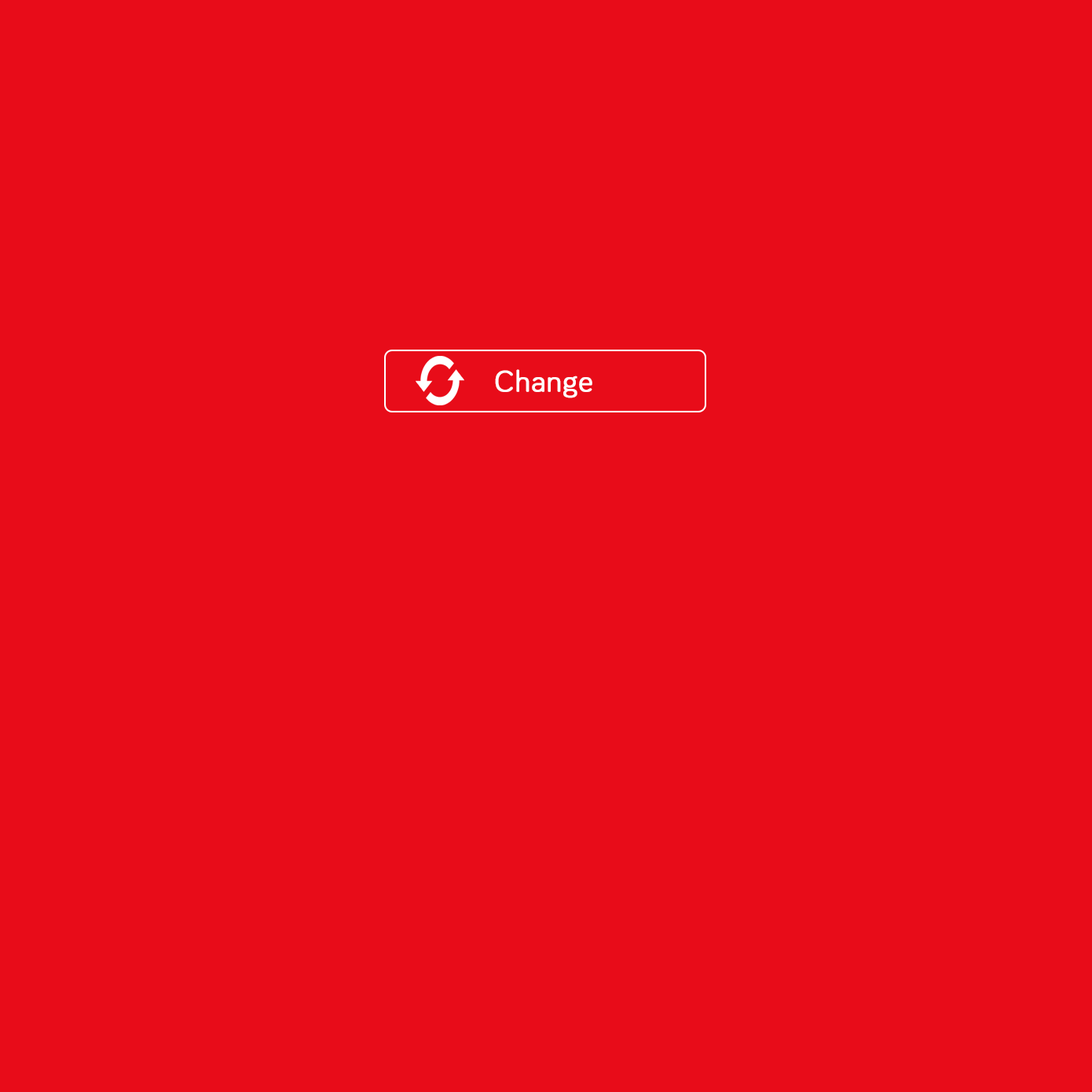
<style>
.page{position:relative;width:1092px;height:1092px;background:#e80c19}
.page>*{position:absolute;margin:0}
.t1{font:30.3px "Bariol-Regular";letter-spacing:0.01em;color:#fefefe;font-weight:bold}
</style>
<div class="page">
<p class="t1" style="left:495px;top:369px;width:97px;height:29px">Change</p>
</div>
